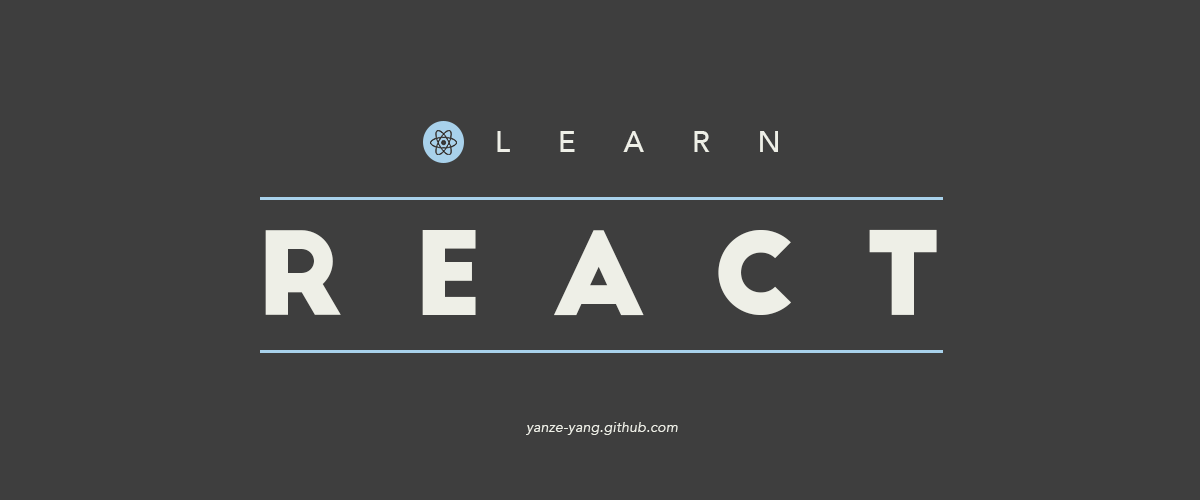
<style>
.page{position:relative;width:1200px;height:500px;background:#3e3e3e}
.page>*{position:absolute;margin:0}
.t1{font:29px "Avenir-Medium";letter-spacing:1.65em;color:#eeefe7}
.t2{font:113px "BigJohnPRO-Bold";letter-spacing:0.61em;color:#eeefe7}
.t3{font:14px "Avenir-BookOblique";letter-spacing:0.02em;color:#eeefe7}
</style>
<div class="page">
<p class="t1" style="left:497px;top:131px;width:281px;height:21px">LEARN</p>
<p class="t2" style="left:265px;top:229px;width:672px;height:87px">REACT</p>
<p class="t3" style="left:526px;top:422px;width:152px;height:13px">yanze-yang.github.com</p>
</div>
